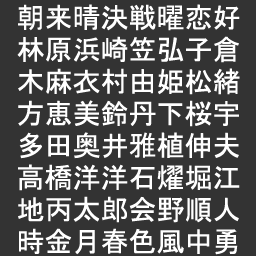
<style>
.page{position:relative;width:256px;height:256px;background:#333333}
.page>*{position:absolute;margin:0}
.t1{font:28px "MS-Gothic";color:#ffffff}
</style>
<div class="page">
<p class="t1" style="left:17px;top:4px;width:223px;height:251px">朝来晴決戦曜恋好<br>林原浜崎笠弘子倉<br>木麻衣村由姫松緒<br>方恵美鈴丹下桜宇<br>多田奥井雅植伸夫<br>高橋洋洋石燿堀江<br>地丙太郎会野順人<br>時金月春色風中勇</p>
</div>
